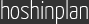
<style>
.page{position:relative;width:89px;height:24px;background:#333333}
.page>*{position:absolute;margin:0}
.t1{font:25px "YanoneKaffeesatz-Thin";color:#ffffff}
</style>
<div class="page">
<p class="t1" style="left:1px;top:0px;width:87px;height:24px">hoshinplan</p>
</div>
